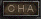
<style>
.page{position:relative;width:41px;height:19px}
.page>*{position:absolute;margin:0}
.t1{font:10.5px "Helvetica-Light";letter-spacing:0.2em;color:#8d7c6a}
</style>
<div class="page">
<p class="t1" style="left:8px;top:5px;width:26px;height:7px">CHA</p>
</div>
